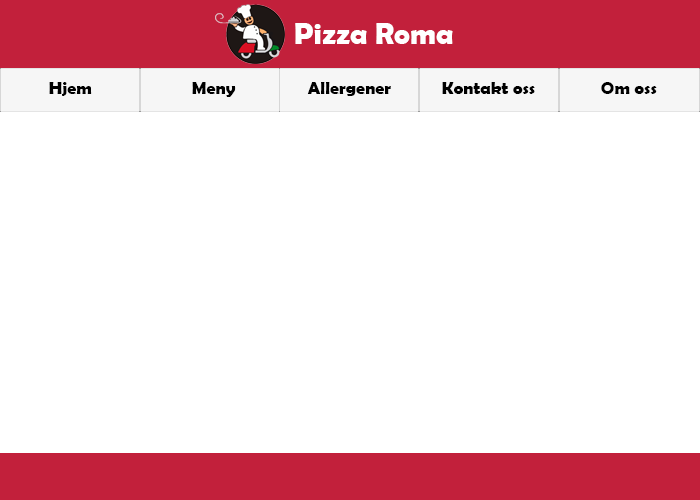
<style>
.page{position:relative;width:700px;height:500px;background:#ffffff}
.page>*{position:absolute;margin:0}
.t1{font:30px "BerlinSansFBDemi-Bold";color:#ffffff}
.t2{font:18px "BerlinSansFBDemi-Bold";color:#000000}
</style>
<div class="page">
<p class="t1" style="left:295px;top:23px;width:158px;height:21px">Pizza Roma</p>
<p class="t2" style="left:49px;top:82px;width:43px;height:14px">Hjem</p>
<p class="t2" style="left:192px;top:82px;width:44px;height:15px">Meny</p>
<p class="t2" style="left:307px;top:82px;width:84px;height:14px">Allergener</p>
<p class="t2" style="left:442px;top:82px;width:93px;height:12px">Kontakt oss</p>
<p class="t2" style="left:601px;top:82px;width:56px;height:12px">Om oss</p>
</div>
